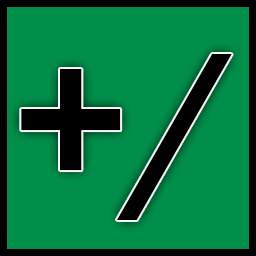
<style>
.page{position:relative;width:256px;height:256px;background:#008f4a}
.page>*{position:absolute;margin:0}
.t1{font:200px "FranklinGothic-Demi";color:#000000}
</style>
<div class="page">
<p class="t1" style="left:21px;top:54px;width:211px;height:166px">+/</p>
</div>
